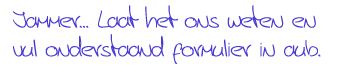
<style>
.page{position:relative;width:350px;height:72px;background:#ffffff}
.page>*{position:absolute;margin:0}
.t1{font:22.8px "Jerry'shandwriting";color:#483ad5;scale:1.16 1}
</style>
<div class="page">
<p class="t1" style="left:13px;top:5px;width:308px;height:59px">Jammer... Laat het ons weten en<br>vul onderstaand formulier in aub.</p>
</div>
